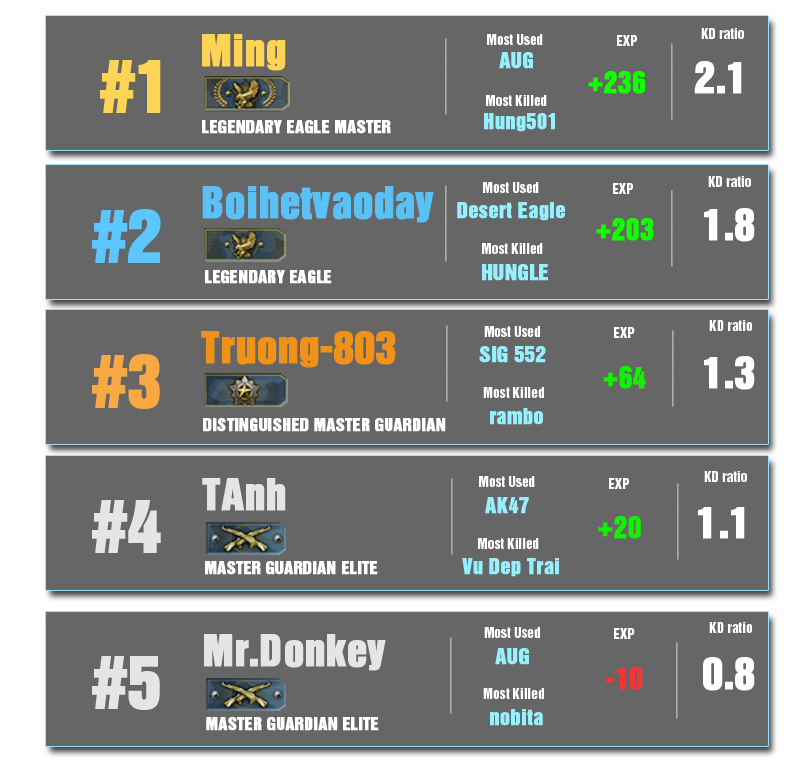
<style>
.page{position:relative;width:800px;height:768px;background:#666666}
.page>*{position:absolute;margin:0}
.t1{font:13.3px "HelveticaInseratLTStd-Roman";color:#ffffff}
.t2{font:40px "HelveticaInseratLTStd-Roman";color:#ffd355;font-weight:bold}
.t3{font:20px "HelveticaInseratLTStd-Roman";color:#95f1ff;font-weight:bold}
.t4{font:66.7px "HelveticaInseratLTStd-Roman";color:#ffd354;font-weight:bold}
.t5{font:40px "HelveticaInseratLTStd-Roman";color:#ffffff;font-weight:bold}
.t6{font:26.7px "HelveticaInseratLTStd-Roman";color:#12ff00;font-weight:bold}
.t7{font:16px "HelveticaInseratLTStd-Roman";color:#ffffff;font-weight:bold}
.t8{font:40px "HelveticaInseratLTStd-Roman";color:#5ac1f7;font-weight:bold}
.t9{font:66.7px "HelveticaInseratLTStd-Roman";color:#5bc7ff;font-weight:bold}
.t10{font:40px "HelveticaInseratLTStd-Roman";color:#f19218;font-weight:bold}
.t11{font:66.7px "HelveticaInseratLTStd-Roman";color:#f8a944;font-weight:bold}
.t12{font:26.7px "HelveticaInseratLTStd-Roman";color:#13f002;font-weight:bold}
.t13{font:40px "HelveticaInseratLTStd-Roman";color:#e5e5e5;font-weight:bold}
.t14{font:66.7px "HelveticaInseratLTStd-Roman";color:#e5e5e5;font-weight:bold}
.t15{font:26.7px "HelveticaInseratLTStd-Roman";color:#ff3131;font-weight:bold}
</style>
<div class="page">
<p class="t1" style="left:701px;top:28px;width:43px;height:11px">KD ratio</p>
<p class="t2" style="left:202px;top:34px;width:84px;height:37px">Ming</p>
<p class="t1" style="left:487px;top:34px;width:56px;height:11px">Most Used</p>
<p class="t1" style="left:617px;top:35px;width:20px;height:11px">EXP</p>
<p class="t3" style="left:499px;top:52px;width:34px;height:17px">AUG</p>
<p class="t4" style="left:100px;top:60px;width:61px;height:53px">#1</p>
<p class="t5" style="left:694px;top:61px;width:48px;height:33px">2.1</p>
<p class="t6" style="left:588px;top:71px;width:58px;height:23px">+236</p>
<p class="t1" style="left:486px;top:95px;width:61px;height:11px">Most Killed</p>
<p class="t3" style="left:484px;top:113px;width:71px;height:19px">Hung501</p>
<p class="t7" style="left:202px;top:120px;width:189px;height:14px">LEGENDARY EAGLE MASTER</p>
<p class="t1" style="left:483px;top:182px;width:56px;height:11px">Most Used</p>
<p class="t1" style="left:613px;top:183px;width:20px;height:11px">EXP</p>
<p class="t1" style="left:708px;top:176px;width:43px;height:11px">KD ratio</p>
<p class="t8" style="left:202px;top:186px;width:232px;height:37px">Boihetvaoday</p>
<p class="t9" style="left:92px;top:209px;width:69px;height:54px">#2</p>
<p class="t3" style="left:457px;top:202px;width:108px;height:19px">Desert Eagle</p>
<p class="t5" style="left:704px;top:208px;width:51px;height:34px">1.8</p>
<p class="t6" style="left:596px;top:218px;width:58px;height:23px">+203</p>
<p class="t1" style="left:482px;top:243px;width:61px;height:11px">Most Killed</p>
<p class="t7" style="left:205px;top:270px;width:127px;height:14px">LEGENDARY EAGLE</p>
<p class="t3" style="left:482px;top:264px;width:66px;height:17px">HUNGLE</p>
<p class="t1" style="left:484px;top:326px;width:56px;height:11px">Most Used</p>
<p class="t1" style="left:614px;top:327px;width:21px;height:11px">EXP</p>
<p class="t1" style="left:709px;top:320px;width:43px;height:11px">KD ratio</p>
<p class="t10" style="left:201px;top:331px;width:195px;height:37px">Truong-803</p>
<p class="t3" style="left:479px;top:346px;width:67px;height:17px">SIG 552</p>
<p class="t11" style="left:92px;top:354px;width:68px;height:55px">#3</p>
<p class="t12" style="left:603px;top:366px;width:43px;height:23px">+64</p>
<p class="t5" style="left:704px;top:356px;width:51px;height:34px">1.3</p>
<p class="t1" style="left:483px;top:387px;width:61px;height:11px">Most Killed</p>
<p class="t3" style="left:490px;top:408px;width:53px;height:17px">rambo</p>
<p class="t7" style="left:203px;top:418px;width:243px;height:14px">DISTINGUISHED MASTER GUARDIAN</p>
<p class="t1" style="left:704px;top:471px;width:43px;height:11px">KD ratio</p>
<p class="t13" style="left:202px;top:478px;width:84px;height:33px">TAnh</p>
<p class="t1" style="left:479px;top:476px;width:56px;height:11px">Most Used</p>
<p class="t1" style="left:609px;top:478px;width:20px;height:11px">EXP</p>
<p class="t3" style="left:485px;top:497px;width:44px;height:17px">AK47</p>
<p class="t14" style="left:92px;top:500px;width:69px;height:53px">#4</p>
<p class="t5" style="left:698px;top:507px;width:47px;height:32px">1.1</p>
<p class="t12" style="left:598px;top:516px;width:43px;height:23px">+20</p>
<p class="t1" style="left:478px;top:538px;width:61px;height:11px">Most Killed</p>
<p class="t3" style="left:462px;top:558px;width:97px;height:19px">Vu Dep Trai</p>
<p class="t7" style="left:205px;top:561px;width:173px;height:14px">MASTER GUARDIAN ELITE</p>
<p class="t1" style="left:484px;top:627px;width:56px;height:11px">Most Used</p>
<p class="t1" style="left:614px;top:628px;width:21px;height:11px">EXP</p>
<p class="t1" style="left:709px;top:622px;width:43px;height:11px">KD ratio</p>
<p class="t13" style="left:204px;top:634px;width:182px;height:37px">Mr.Donkey</p>
<p class="t3" style="left:495px;top:648px;width:34px;height:17px">AUG</p>
<p class="t14" style="left:92px;top:656px;width:68px;height:54px">#5</p>
<p class="t5" style="left:703px;top:657px;width:52px;height:34px">0.8</p>
<p class="t15" style="left:606px;top:667px;width:37px;height:23px">-10</p>
<p class="t1" style="left:483px;top:688px;width:61px;height:11px">Most Killed</p>
<p class="t3" style="left:490px;top:709px;width:53px;height:17px">nobita</p>
<p class="t7" style="left:206px;top:717px;width:173px;height:14px">MASTER GUARDIAN ELITE</p>
</div>
